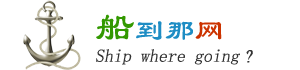
<style>
.page{position:relative;width:300px;height:70px;background:#ffffff}
.page>*{position:absolute;margin:0}
.t1{font:30px "LiSu";color:#1e8dc4}
.t2{font:40px "LiSu";color:#339900}
.t3{font:30px "LiSu";color:#cc3300}
.t4{font:18px "LiSu";color:#333333;font-style:italic}
</style>
<div class="page">
<p class="t1" style="left:96px;top:14px;width:126px;height:26px"><span class="t2">船</span>到那<span class="t3">网</span></p>
<p class="t4" style="left:96px;top:49px;width:157px;height:16px">Ship where going？</p>
</div>
